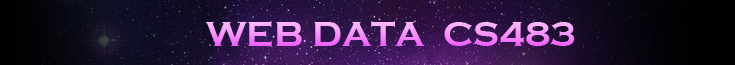
<style>
.page{position:relative;width:735px;height:65px}
.page>*{position:absolute;margin:0}
.t1{font:36px "CopperplateBeckerBold"}
</style>
<div class="page">
<p class="t1" style="left:205px;top:21px;width:370px;height:26px">WEB DATA  CS483</p>
</div>
